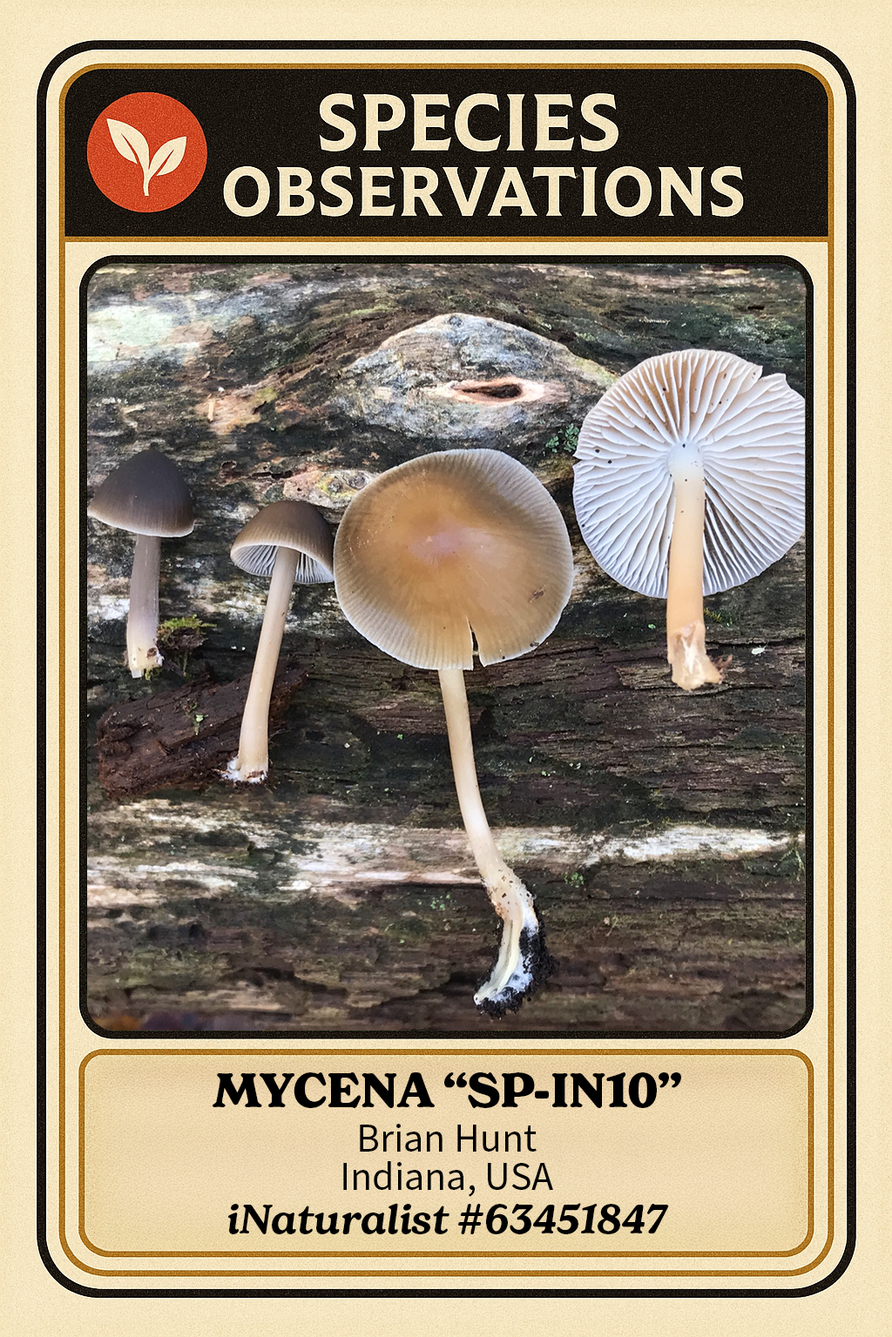
<style>
.page{position:relative;width:892px;height:1337px}
.page>*{position:absolute;margin:0}
.t1{font:47px "NewSpirit-Bold";color:#000000}
.t2{font:40.1px "SourceSansPro-Regular";color:#000000}
.t3{font:40.1px "NewSpirit-SemiBoldItalic";color:#000000}
</style>
<div class="page">
<p class="t1" style="left:212px;top:1073px;width:469px;height:35px">MYCENA “SP-IN10”</p>
<p class="t2" style="left:360px;top:1124px;width:176px;height:28px">Brian Hunt</p>
<p class="t2" style="left:343px;top:1162px;width:210px;height:35px">Indiana, USA</p>
<p class="t3" style="left:228px;top:1203px;width:441px;height:32px">iNaturalist #63451847</p>
</div>
